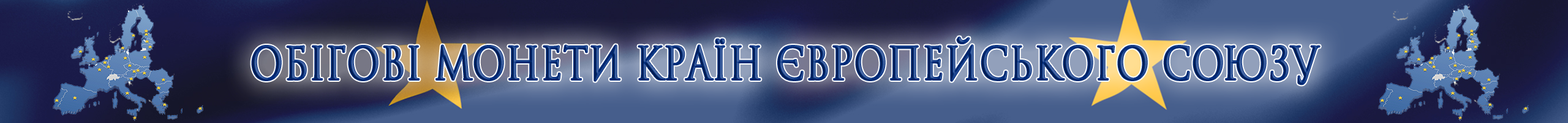
<style>
.page{position:relative;width:1568px;height:123px}
.page>*{position:absolute;margin:0}
.t1{font:44.1px "Romul";font-weight:bold;scale:0.8 1}
</style>
<div class="page">
<p class="t1" style="left:252px;top:37px;width:1068px;height:48px">Обігові монети країн європейського союзу</p>
</div>
